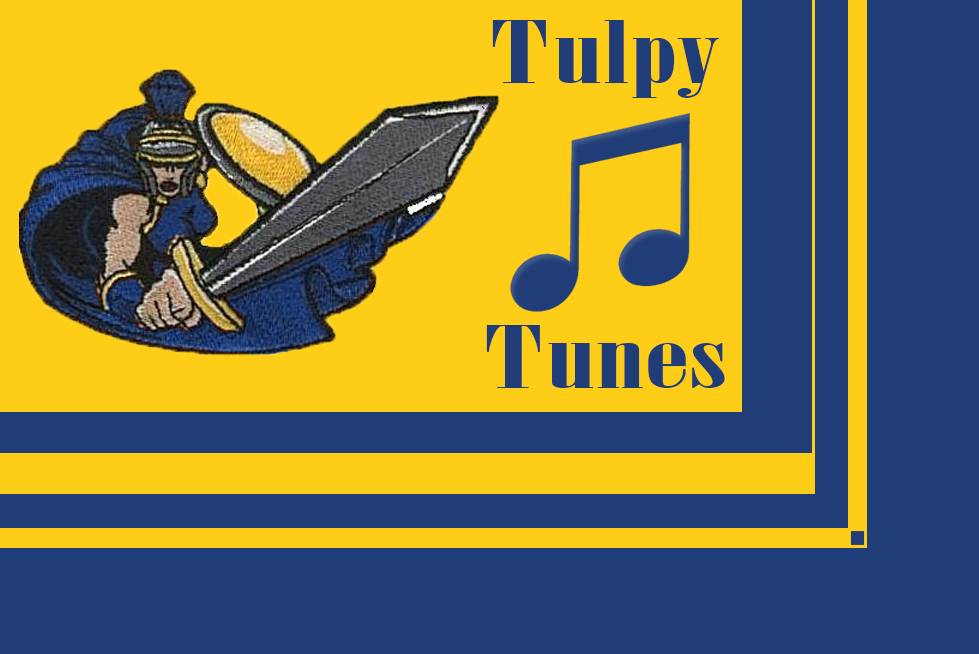
<style>
.page{position:relative;width:979px;height:654px;background:#203d77}
.page>*{position:absolute;margin:0}
.t1{font:84.6px "Onyx";color:#203d77;scale:1.97 1}
</style>
<div class="page">
<p class="t1" style="left:486px;top:20px;width:239px;height:368px;text-align:center">Tulpy<br><br><br>Tunes</p>
</div>
